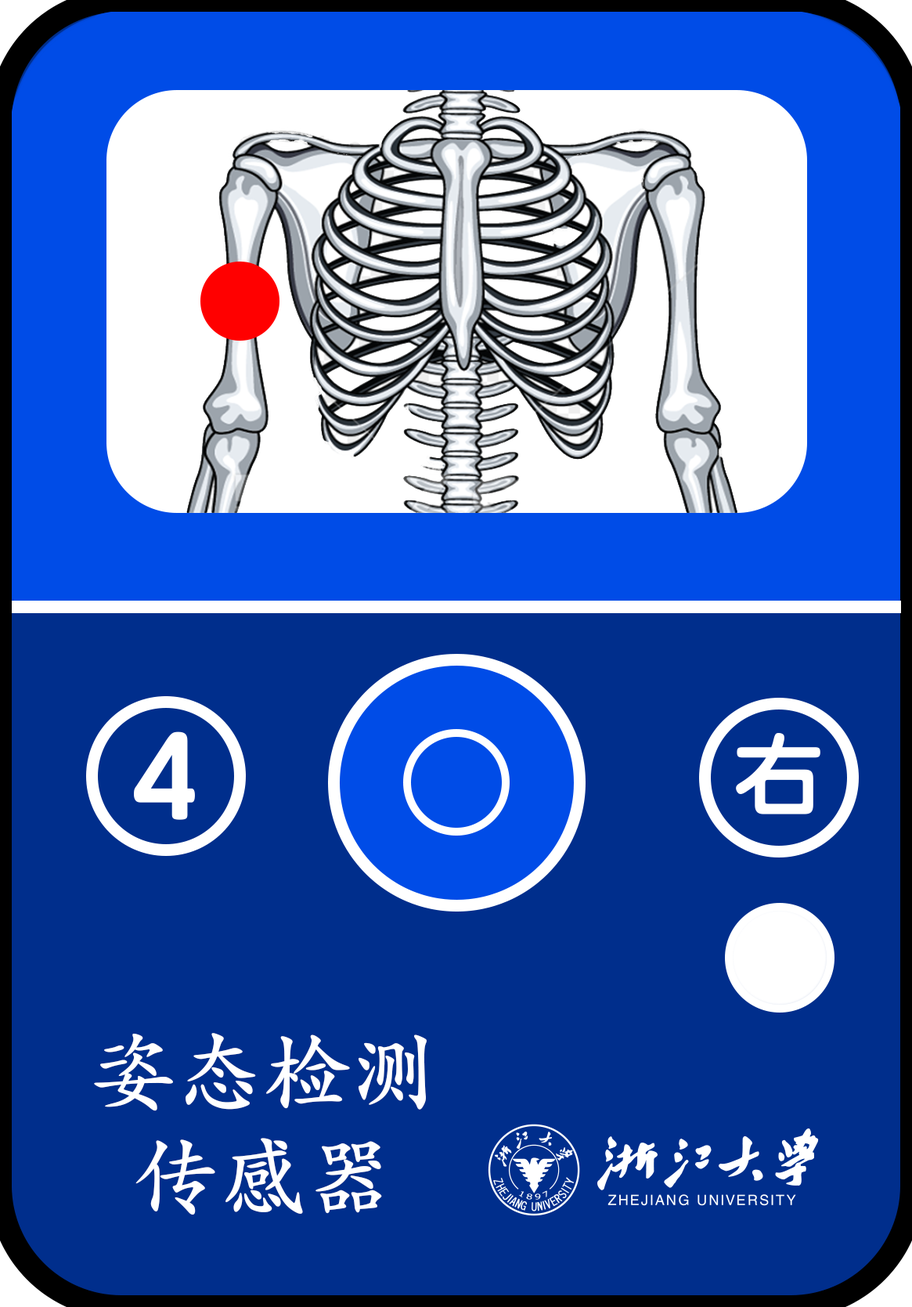
<style>
.page{position:relative;width:912px;height:1307px;background:#002e8c}
.page>*{position:absolute;margin:0}
.t1{font:121.8px "STYuanti-TC-Bold";letter-spacing:0.1em;color:#ffffff}
.t2{font:87px "STYuanti-TC-Bold";letter-spacing:0.1em;color:#ffffff}
.t3{font:87.6px "STKaitiTC-Bold";color:#ffffff}
</style>
<div class="page">
<p class="t1" style="left:134px;top:731px;width:61px;height:89px">4</p>
<p class="t2" style="left:736px;top:733px;width:85px;height:81px">右</p>
<p class="t3" style="left:94px;top:1033px;width:333px;height:182px;text-align:center">姿态检测<br>传感器</p>
</div>
